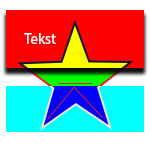
<style>
.page{position:relative;width:150px;height:150px;background:#ff0000}
.page>*{position:absolute;margin:0}
.t1{font:15px "MyriadPro-Regular";color:#ffffff}
</style>
<div class="page">
<p class="t1" style="left:24px;top:33px;width:32px;height:11px">Tekst</p>
</div>
